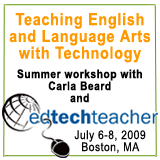
<style>
.page{position:relative;width:160px;height:160px;background:#ffffff}
.page>*{position:absolute;margin:0}
.t1{font:16.8px "Arial-BoldMT";letter-spacing:0.055em;color:#ff9900;scale:0.85 1}
.t2{font:12px "Arial-BoldMT";letter-spacing:0.055em;color:#000000;scale:0.85 1}
.t3{font:12px "ArialMT";letter-spacing:0.055em;color:#080809;scale:0.85 1}
</style>
<div class="page">
<p class="t1" style="left:9px;top:13px;width:142px;height:50px;text-align:center">Teaching English and Language Arts with Technology</p>
<p class="t2" style="left:17px;top:69px;width:125px;height:34px;text-align:center">Summer workshop with Carla Beard<br>and</p>
<p class="t3" style="left:74px;top:130px;width:72px;height:23px;text-align:center">July 6-8, 2009<br>Boston, MA</p>
</div>
